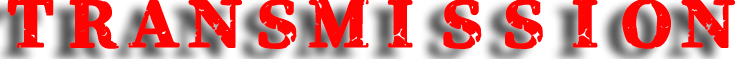
<style>
.page{position:relative;width:737px;height:59px;background:#ff0303}
.page>*{position:absolute;margin:0}
.t1{font:60px "Genkaimincho";color:#ff0000;font-weight:bold}
</style>
<div class="page">
<p class="t1" style="left:7px;top:0px;width:728px;height:49px">ＴＲＡＮＳＭＩＳＳＩＯＮ</p>
</div>
